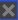
<style>
.page{position:relative;width:18px;height:20px;background:#414141}
.page>*{position:absolute;margin:0}
.t1{font:27.3px "Arial-BoldMT";letter-spacing:0.01em;color:#7f7e7e}
</style>
<div class="page">
<p class="t1" style="left:2px;top:4px;width:13px;height:13px">×</p>
</div>
